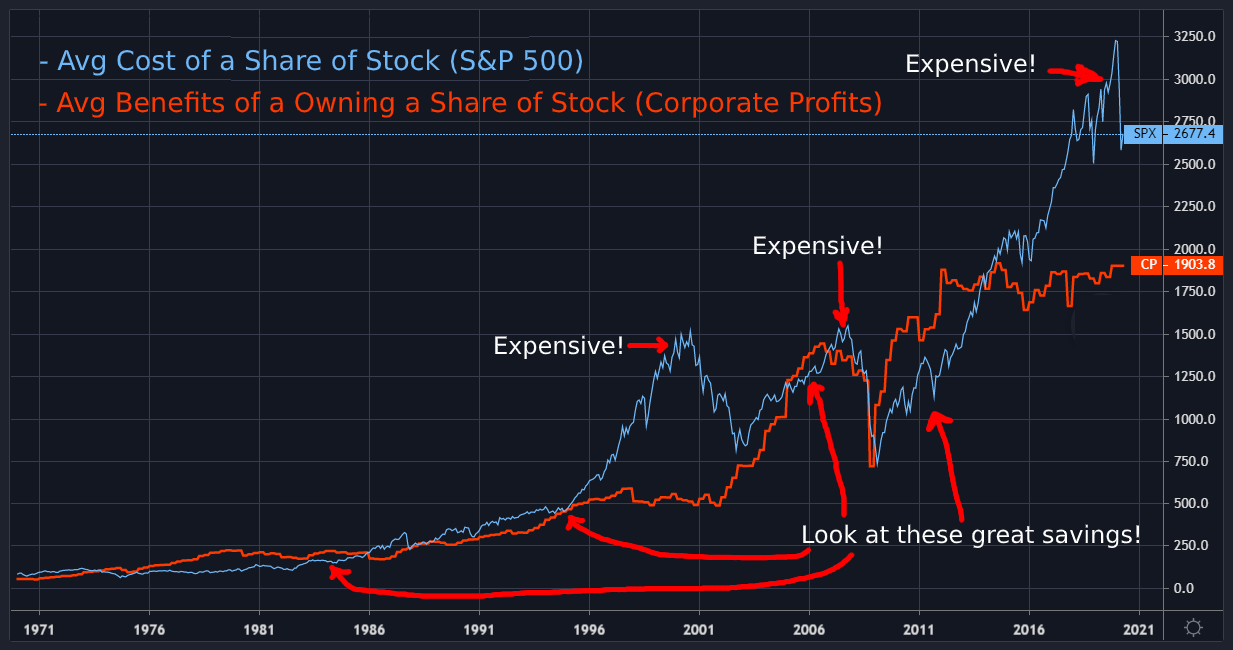
<style>
.page{position:relative;width:1233px;height:650px;background:#131722}
.page>*{position:absolute;margin:0}
.t1{font:27px "DejaVuSans";color:#6fb8f7}
.t2{font:24px "DejaVuSans";color:#ffffff}
.t3{font:27px "DejaVuSans";color:#ff3a00}
</style>
<div class="page">
<p class="t1" style="left:40px;top:49px;width:543px;height:27px">- Avg Cost of a Share of Stock (S&amp;P 500)</p>
<p class="t2" style="left:907px;top:53px;width:127px;height:24px">Expensive!</p>
<p class="t3" style="left:39px;top:91px;width:842px;height:27px">- Avg Benefits of a Owning a Share of Stock (Corporate Profits)</p>
<p class="t2" style="left:754px;top:235px;width:127px;height:24px">Expensive!</p>
<p class="t2" style="left:495px;top:335px;width:127px;height:24px">Expensive!</p>
<p class="t2" style="left:803px;top:524px;width:336px;height:24px">Look at these great savings!</p>
</div>
